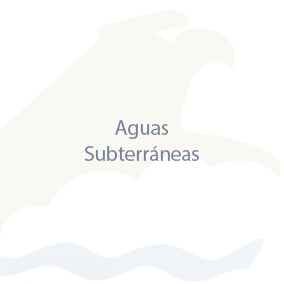
<style>
.page{position:relative;width:284px;height:284px;background:#ffffff}
.page>*{position:absolute;margin:0}
.t1{font:21px "MyriadPro-Regular";color:#78829c}
</style>
<div class="page">
<p class="t1" style="left:84px;top:120px;width:115px;height:41px;text-align:center">Aguas <br>Subterráneas</p>
</div>
